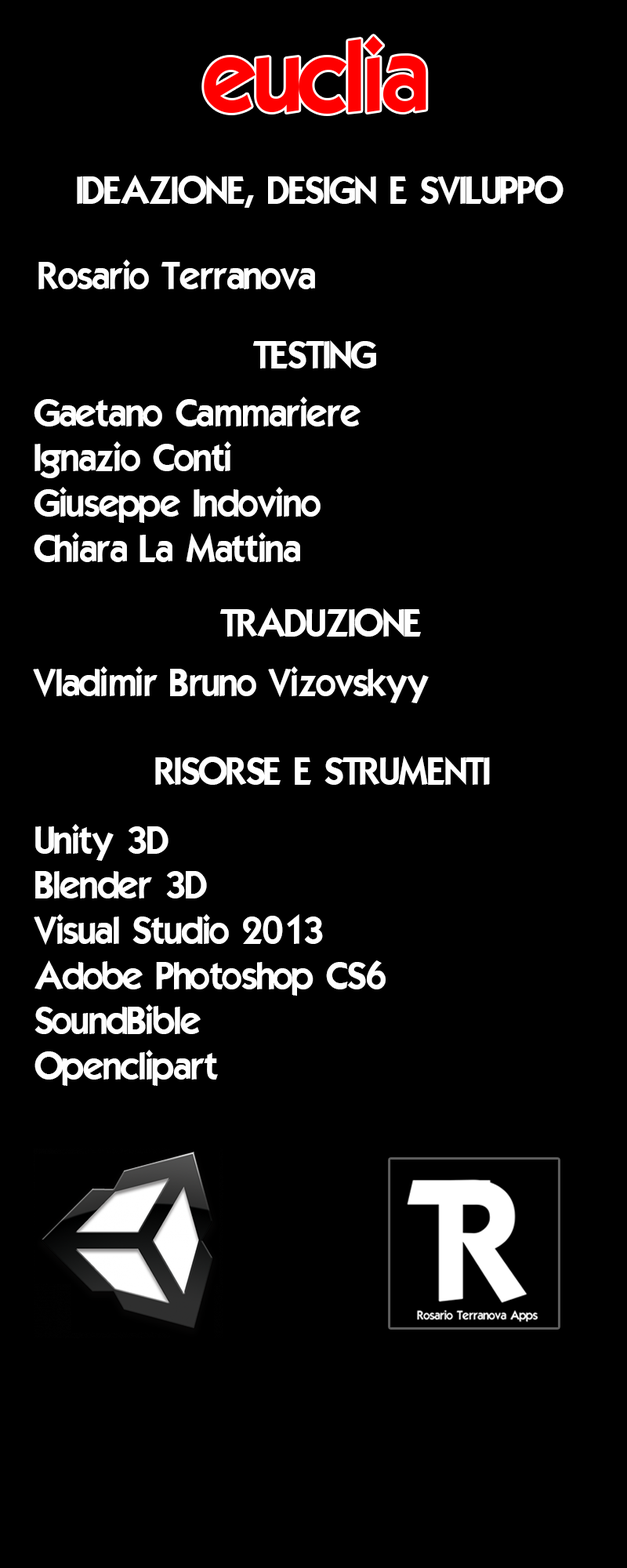
<style>
.page{position:relative;width:627px;height:1568px;background:#000000}
.page>*{position:absolute;margin:0}
.t1{font:37.6px "ELEGANCE";color:#ffffff}
</style>
<div class="page">
<p class="t1" style="left:77px;top:175px;width:487px;height:33px">IDEAZIONE, DESIGN E SVILUPPO</p>
<p class="t1" style="left:38px;top:260px;width:277px;height:30px">Rosario Terranova</p>
<p class="t1" style="left:253px;top:340px;width:123px;height:28px">TESTING</p>
<p class="t1" style="left:34px;top:397px;width:327px;height:165px">Gaetano Cammariere<br>Ignazio Conti<br>Giuseppe Indovino<br>Chiara La Mattina</p>
<p class="t1" style="left:220px;top:608px;width:201px;height:29px">TRADUZIONE</p>
<p class="t1" style="left:33px;top:666px;width:396px;height:37px">Vladimir Bruno Vizovskyy</p>
<p class="t1" style="left:155px;top:756px;width:335px;height:29px">RISORSE E STRUMENTI</p>
<p class="t1" style="left:34px;top:824px;width:352px;height:262px">Unity 3D<br>Blender 3D<br>Visual Studio 2013<br>Adobe Photoshop CS6<br>SoundBible<br>Openclipart</p>
</div>
